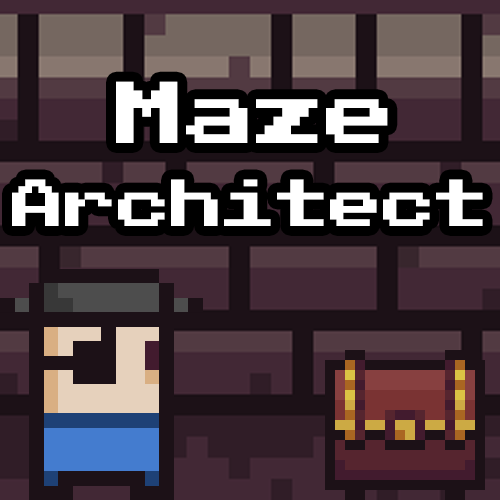
<style>
.page{position:relative;width:500px;height:500px;background:#1c1117}
.page>*{position:absolute;margin:0}
.t1{font:70px "PublicPixel";color:#ffffff}
.t2{font:53px "PublicPixel";color:#ffffff}
</style>
<div class="page">
<p class="t1" style="left:116px;top:81px;width:272px;height:62px">Maze</p>
<p class="t2" style="left:12px;top:179px;width:471px;height:47px">Architect</p>
</div>
